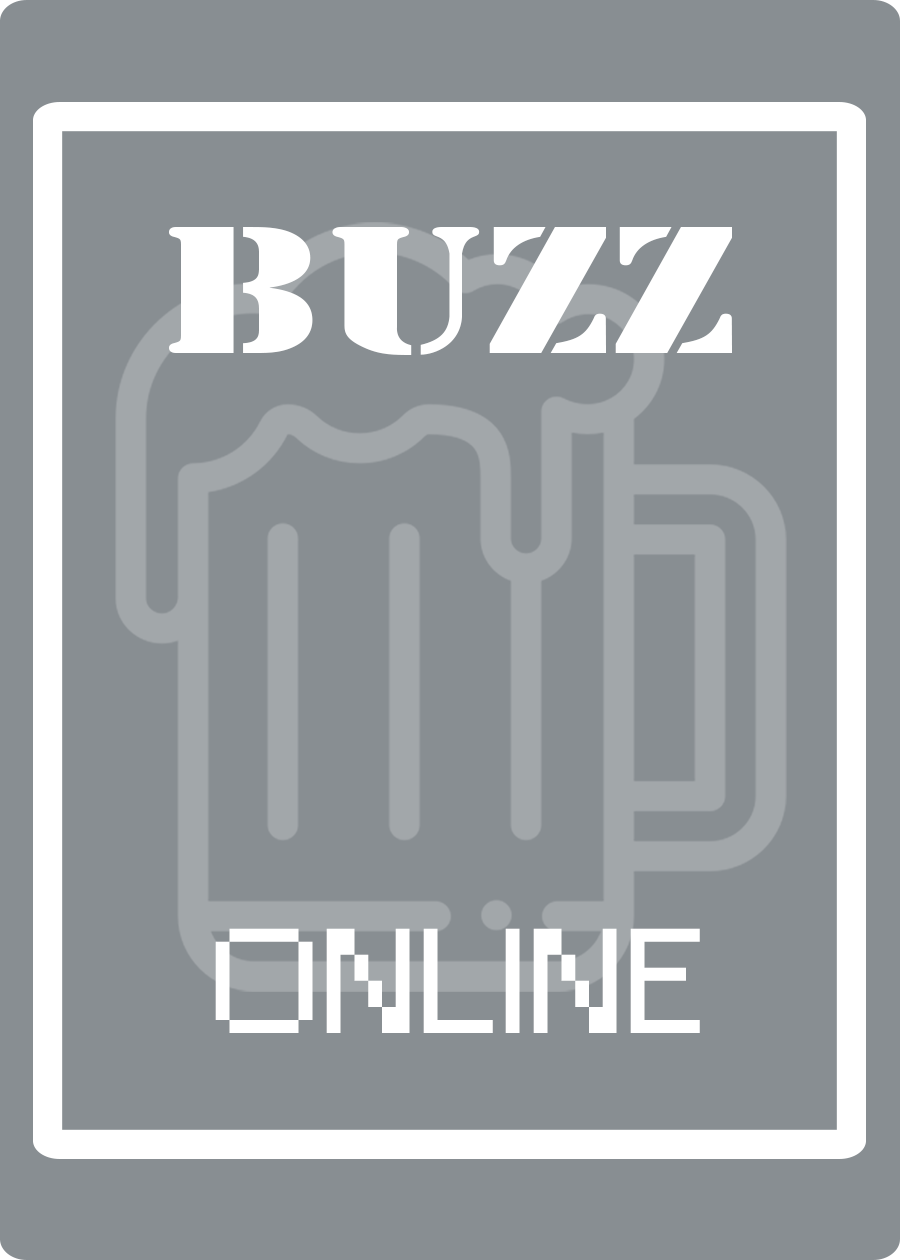
<style>
.page{position:relative;width:900px;height:1260px;background:#888e92}
.page>*{position:absolute;margin:0}
.t1{font:168.7px "StencilStd";color:#ffffff;scale:1.27 1}
.t2{font:139.1px "Small Fonts";color:#ffffff;scale:1.27 1}
</style>
<div class="page">
<p class="t1" style="left:169px;top:227px;width:563px;height:128px">BUZZ</p>
<p class="t2" style="left:215px;top:928px;width:485px;height:105px">ONLINE</p>
</div>
